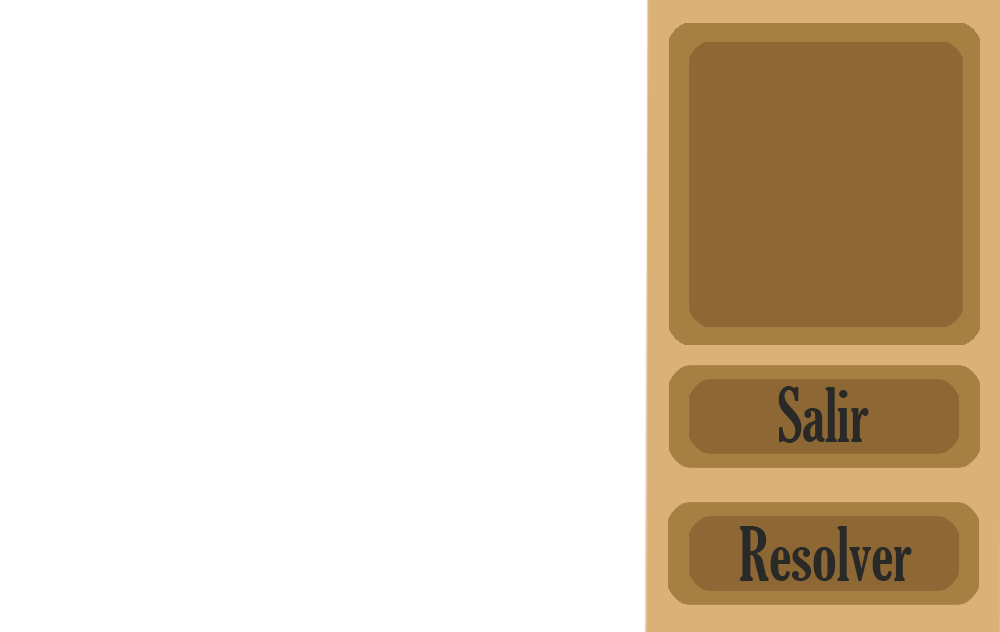
<style>
.page{position:relative;width:1000px;height:632px;background:#ffffff}
.page>*{position:absolute;margin:0}
.t1{font:72px "GloucesterMT-ExtraCondensed";color:#292928}
</style>
<div class="page">
<p class="t1" style="left:778px;top:386px;width:91px;height:57px">Salir</p>
<p class="t1" style="left:740px;top:526px;width:172px;height:55px">Resolver</p>
</div>
